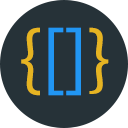
<style>
.page{position:relative;width:128px;height:128px;background:#263238}
.page>*{position:absolute;margin:0}
.t1{font:80px "MyriadHebrew-Regular";color:#2196f3}
.t2{font:80px "MyriadHebrew-Regular";color:#e6b422}
</style>
<div class="page">
<p class="t1" style="left:21px;top:27px;width:88px;height:69px"><span class="t2">{</span>[]<span class="t2">}</span></p>
</div>
